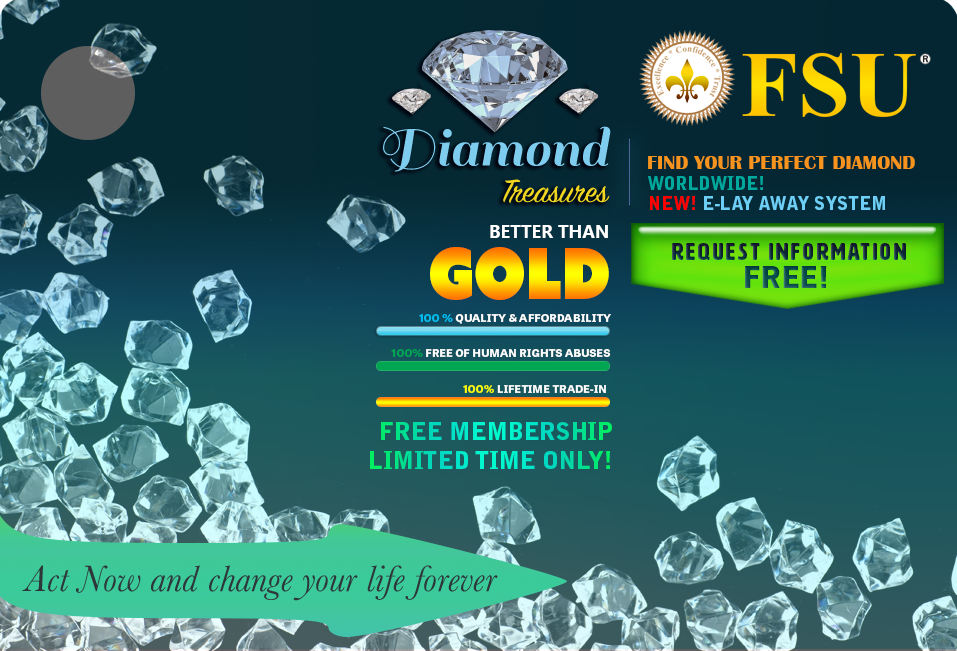
<style>
.page{position:relative;width:957px;height:651px}
.page>*{position:absolute;margin:0}
.t1{font:20px "BritannicBold";color:#f7941d}
.t2{font:18px "BellGothicStd-Black";color:#00a99d}
.t3{font:18px "BellGothicStd-Black";color:#6dcff6}
.t4{font:18px "BellGothicStd-Black";color:#ff0000}
.t5{font:18px "NirmalaUI-Bold";color:#ffffff}
.t6{font:24px/28px "HWTArtz";letter-spacing:0.1em}
.t7{font:30px/28px "TabletGothicWide-Bold";letter-spacing:0.02em}
.t8{font:70.3px "AzoSansUber-Regular";scale:0.85 1}
.t9{font:11px "TabletGothicWide-Bold";letter-spacing:0.02em;color:#ffffff}
.t10{font:11px "TabletGothicWide-Bold";letter-spacing:0.02em;color:#00bff3}
.t11{font:11px "TabletGothicWide-Bold";letter-spacing:0.02em;color:#00a651}
.t12{font:11px "TabletGothicWide-Bold";letter-spacing:0.02em;color:#ffff00}
.t13{font:24px "BellGothicStd-Black"}
.t14{font:38px "Baskerville-Italic";color:#2d3639}
</style>
<div class="page">
<p class="t1" style="left:648px;top:156px;width:267px;height:13px">FIND YOUR PERFECT DIAMOND</p>
<p class="t2" style="left:648px;top:176px;width:115px;height:14px">WORLDWIDE!</p>
<p class="t3" style="left:650px;top:196px;width:235px;height:14px"><span class="t4">NEW! </span>E-LAY AWAY SYSTEM</p>
<p class="t5" style="left:490px;top:225px;width:118px;height:13px">BETTER THAN</p>
<p class="t6" style="left:672px;top:243px;width:234px;height:45px;text-align:center">Request Information<br><span class="t7">FREE!</span></p>
<p class="t8" style="left:430px;top:247px;width:179px;height:53px">GOLD</p>
<p class="t9" style="left:419px;top:314px;width:192px;height:10px"><span class="t10">100 % </span>QUALITY &amp; AFFORDABILITY</p>
<p class="t9" style="left:391px;top:349px;width:220px;height:8px"><span class="t11">100% </span>FREE OF HUMAN RIGHTS ABUSES</p>
<p class="t9" style="left:463px;top:385px;width:143px;height:8px"><span class="t12">100% </span>LIFETIME TRADE-IN</p>
<p class="t13" style="left:370px;top:422px;width:242px;height:47px;text-align:right">FREE MEMBERSHIP<br>LIMITED TIME ONLY!</p>
<p class="t14" style="left:22px;top:565px;width:476px;height:36px">Act Now and change your life forever</p>
</div>
